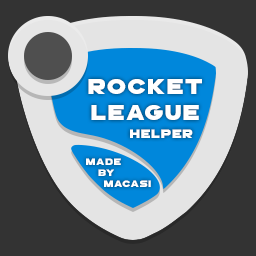
<style>
.page{position:relative;width:256px;height:256px;background:#333333}
.page>*{position:absolute;margin:0}
.t1{font:22.1px "GoGoPosterPunch";letter-spacing:0.06em;color:#ffffff;scale:1.17 1}
.t2{font:12.5px "GoGoPosterPunch";letter-spacing:0.06em;color:#ffffff;scale:1.2 1}
.t3{font:9.6px "GoGoPosterPunch";letter-spacing:0.06em;color:#ffffff;scale:1.21 1}
</style>
<div class="page">
<p class="t1" style="left:88px;top:79px;width:114px;height:41px;text-align:center">ROCKET<br>LEAGUE</p>
<p class="t2" style="left:130px;top:129px;width:63px;height:9px">HELPER</p>
<p class="t3" style="left:86px;top:158px;width:35px;height:7px">Made</p>
<p class="t3" style="left:98px;top:169px;width:16px;height:7px">by</p>
<p class="t3" style="left:104px;top:180px;width:47px;height:7px">macas1</p>
</div>
